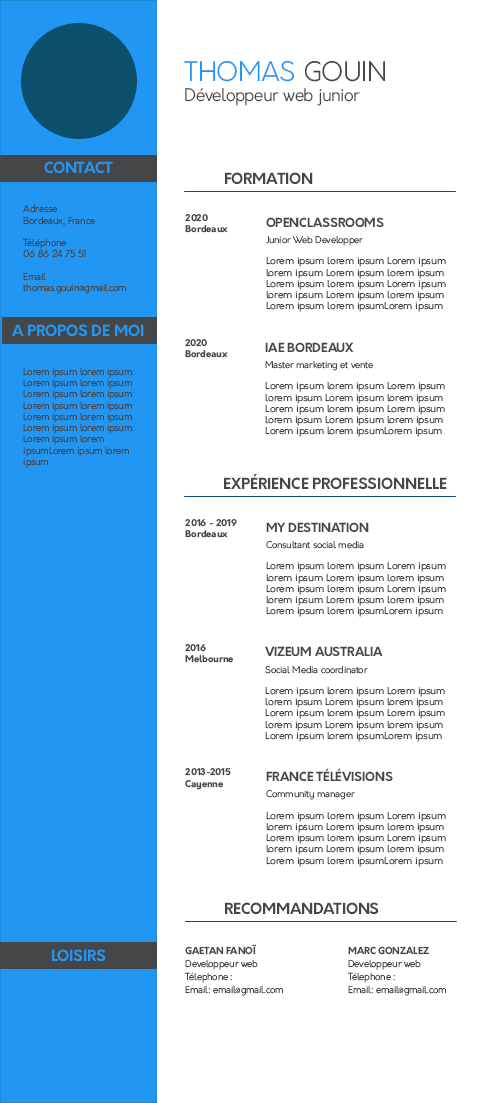
<style>
.page{position:relative;width:480px;height:1103px;background:#ffffff}
.page>*{position:absolute;margin:0}
.t1{font:16.9px "Orkney-Light";color:#454647}
.t2{font:26.3px "Orkney-Light";color:#2196f3}
.t3{font:26.3px "Orkney-Light";color:#454647}
.t4{font:15.1px "Orkney-Bold";color:#2196f3}
.t5{font:15.1px "Orkney-Bold";color:#454647}
.t6{font:9.4px "Orkney-Light";color:#454647}
.t7{font:9px "Orkney-Bold";color:#454647;scale:1.04 1}
.t8{font:12.2px "Orkney-Bold";color:#454647}
.t9{font:9px "Orkney-Light";color:#454647;scale:1.04 1}
.t10{font:9.4px "Orkney-Light";color:#454647;scale:1.09 1}
.t11{font:9.4px/13.2px "Orkney-Light";color:#454647}
.t12{font:9.4px/13.2px "Orkney-Bold";color:#454647}
</style>
<div class="page">
<p class="t1" style="left:184px;top:61px;width:201px;height:45px"><span class="t2">THOMAS </span><span class="t3">GOUIN<br></span>Développeur web junior</p>
<p class="t4" style="left:44px;top:161px;width:69px;height:13px">CONTACT</p>
<p class="t5" style="left:225px;top:172px;width:88px;height:13px">FORMATION</p>
<p class="t6" style="left:23px;top:204px;width:103px;height:90px">Adresse <br>Bordeaux, France<br><br>Téléphone<br>06 86 24 75 51<br><br>Email<br>thomas.gouin@gmail.com</p>
<p class="t7" style="left:185px;top:214px;width:43px;height:19px">2020<br>Bordeaux</p>
<p class="t8" style="left:266px;top:217px;width:118px;height:10px">OPENCLASSROOMS</p>
<p class="t9" style="left:266px;top:236px;width:97px;height:10px">Junior Web Developper</p>
<p class="t10" style="left:266px;top:256px;width:180px;height:56px">Lorem ipsum lorem ipsum Lorem ipsum lorem ipsum Lorem ipsum lorem ipsum Lorem ipsum lorem ipsum Lorem ipsum lorem ipsum Lorem ipsum lorem ipsum Lorem ipsum lorem ipsumLorem ipsum lorem ipsum</p>
<p class="t4" style="left:12px;top:324px;width:132px;height:13px">A PROPOS DE MOI</p>
<p class="t7" style="left:185px;top:339px;width:43px;height:19px">2020<br>Bordeaux</p>
<p class="t8" style="left:265px;top:342px;width:89px;height:10px">IAE BORDEAUX</p>
<p class="t9" style="left:265px;top:361px;width:108px;height:10px">Master marketing et vente</p>
<p class="t6" style="left:23px;top:367px;width:109px;height:101px">Lorem ipsum lorem ipsum Lorem ipsum lorem ipsum Lorem ipsum lorem ipsum Lorem ipsum lorem ipsum Lorem ipsum lorem ipsum Lorem ipsum lorem ipsum Lorem ipsum lorem ipsumLorem ipsum lorem ipsum</p>
<p class="t10" style="left:265px;top:381px;width:180px;height:56px">Lorem ipsum lorem ipsum Lorem ipsum lorem ipsum Lorem ipsum lorem ipsum Lorem ipsum lorem ipsum Lorem ipsum lorem ipsum Lorem ipsum lorem ipsum Lorem ipsum lorem ipsumLorem ipsum lorem ipsum</p>
<p class="t5" style="left:224px;top:473px;width:223px;height:17px">EXPÉRIENCE PROFESSIONNELLE</p>
<p class="t7" style="left:185px;top:519px;width:52px;height:19px">2016 - 2019<br>Bordeaux</p>
<p class="t8" style="left:266px;top:522px;width:103px;height:10px">MY DESTINATION</p>
<p class="t9" style="left:266px;top:541px;width:98px;height:8px">Consultant social media</p>
<p class="t10" style="left:266px;top:561px;width:180px;height:56px">Lorem ipsum lorem ipsum Lorem ipsum lorem ipsum Lorem ipsum lorem ipsum Lorem ipsum lorem ipsum Lorem ipsum lorem ipsum Lorem ipsum lorem ipsum Lorem ipsum lorem ipsumLorem ipsum lorem ipsum</p>
<p class="t7" style="left:185px;top:644px;width:48px;height:19px">2016<br>Melbourne</p>
<p class="t8" style="left:265px;top:646px;width:118px;height:10px">VIZEUM AUSTRALIA</p>
<p class="t9" style="left:265px;top:666px;width:103px;height:8px">Social Media coordinator</p>
<p class="t10" style="left:265px;top:686px;width:180px;height:56px">Lorem ipsum lorem ipsum Lorem ipsum lorem ipsum Lorem ipsum lorem ipsum Lorem ipsum lorem ipsum Lorem ipsum lorem ipsum Lorem ipsum lorem ipsum Lorem ipsum lorem ipsumLorem ipsum lorem ipsum</p>
<p class="t7" style="left:185px;top:768px;width:46px;height:22px">2013-2015<br>Cayenne</p>
<p class="t8" style="left:266px;top:768px;width:127px;height:13px">FRANCE TÉLÉVISIONS</p>
<p class="t9" style="left:266px;top:790px;width:89px;height:10px">Community manager</p>
<p class="t10" style="left:266px;top:811px;width:180px;height:56px">Lorem ipsum lorem ipsum Lorem ipsum lorem ipsum Lorem ipsum lorem ipsum Lorem ipsum lorem ipsum Lorem ipsum lorem ipsum Lorem ipsum lorem ipsum Lorem ipsum lorem ipsumLorem ipsum lorem ipsum</p>
<p class="t5" style="left:225px;top:902px;width:154px;height:13px">RECOMMANDATIONS</p>
<p class="t4" style="left:52px;top:949px;width:54px;height:13px">LOISIRS</p>
<p class="t11" style="left:185px;top:944px;width:98px;height:52px"><span class="t12">GAETAN FANOÏ<br></span>Developpeur web<br>Télephone :<br>Email: email@gmail.com</p>
<p class="t11" style="left:348px;top:946px;width:98px;height:50px"><span class="t12">MARC GONZALEZ<br></span>Developpeur web<br>Télephone :<br>Email: email@gmail.com</p>
</div>
